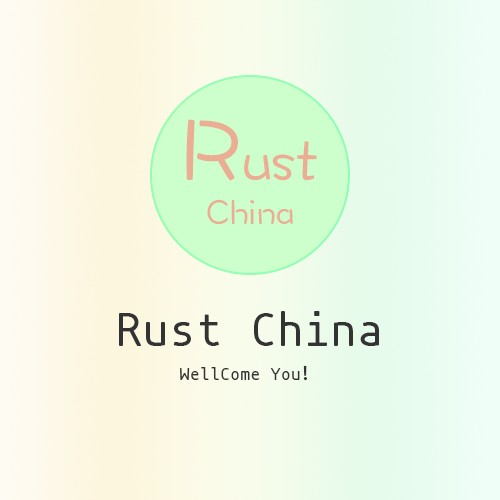
<style>
.page{position:relative;width:500px;height:500px}
.page>*{position:absolute;margin:0}
.t1{font:60px "DFWaWaSC-W5";color:#ebad94}
.t2{font:90px "DFWaWaSC-W5";color:#ebad94}
.t3{font:36px "DFWaWaSC-W5";color:#ebad94}
.t4{font:48px "mononoki-Regular";color:#333333}
.t5{font:18px "mononoki-Regular";color:#333333}
.t6{font:18px "AdobeHeitiStd-Regular";color:#333333}
</style>
<div class="page">
<p class="t1" style="left:186px;top:119px;width:131px;height:62px"><span class="t2">R</span>ust</p>
<p class="t3" style="left:207px;top:199px;width:86px;height:26px">China</p>
<p class="t4" style="left:119px;top:311px;width:260px;height:35px">Rust China</p>
<p class="t5" style="left:180px;top:365px;width:127px;height:16px">WellCome You<span class="t6">！</span></p>
</div>
